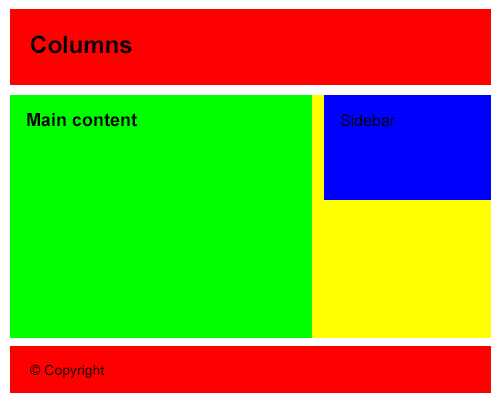
<style>
.page{position:relative;width:500px;height:405px;background:#00ff00}
.page>*{position:absolute;margin:0}
.t1{font:24px "Arial-BoldMT";color:#000000}
.t2{font:18px "Arial-BoldMT";color:#000000}
.t3{font:16px "ArialMT";color:#000000}
.t4{font:14px "ArialMT";color:#000000}
</style>
<div class="page">
<p class="t1" style="left:31px;top:35px;width:101px;height:19px">Columns</p>
<p class="t2" style="left:27px;top:113px;width:110px;height:14px">Main content</p>
<p class="t3" style="left:340px;top:114px;width:56px;height:13px">Sidebar</p>
<p class="t4" style="left:30px;top:364px;width:75px;height:14px">© Copyright</p>
</div>
